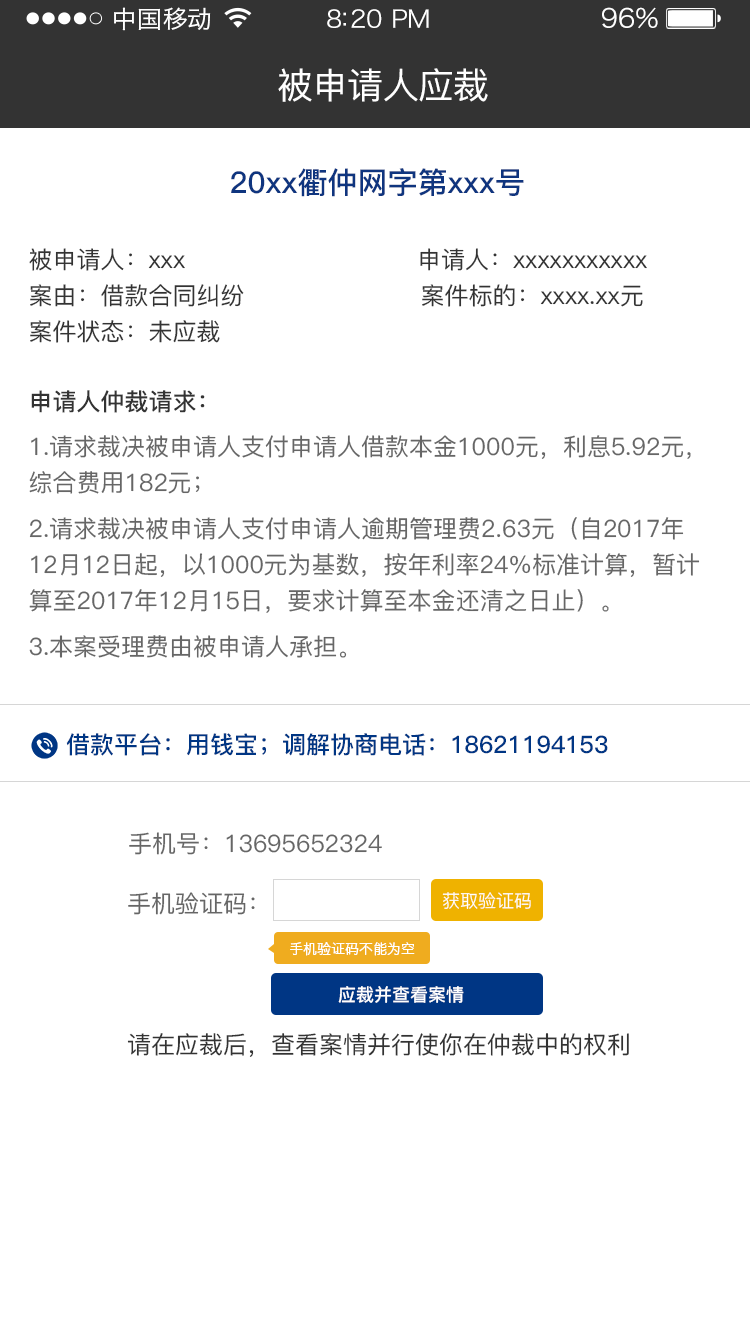
<style>
.page{position:relative;width:750px;height:1334px;background:#ffffff}
.page>*{position:absolute;margin:0}
.t1{font:24px "HiraginoSansGB-W3";letter-spacing:0.02em;color:#ffffff;scale:1.03 1}
.t2{font:24px "HiraginoSansGB-W3";letter-spacing:-0.02em;color:#ffffff;scale:1.03 1}
.t3{font:26.2px "HiraginoSansGB-W3";letter-spacing:-0.02em;color:#ffffff;scale:1.03 1}
.t4{font:36px "PingFang-SC-Medium";letter-spacing:-0.02em;color:#ffffff}
.t5{font:30px "PingFang-SC-Bold";color:#0f357f}
.t6{font:24px/36px "PingFang-SC-Medium";color:#333333}
.t7{font:24px "PingFang-SC-Bold";color:#333333}
.t8{font:24px/36px "PingFang-SC-Medium";color:#666666}
.t9{font:24px "PingFang-SC-Medium";color:#666666}
.t10{font:24px "PingFang-SC-Bold";color:#003684}
.t11{font:18px "PingFang-SC-Regular";color:#ffffff}
.t12{font:14px "HiraginoSansGB-W3";color:#ffffff}
.t13{font:18px "PingFang-SC-Bold";color:#ffffff}
.t14{font:24px "PingFang-SC-Medium";color:#333333}
</style>
<div class="page">
<p class="t1" style="left:114px;top:7px;width:97px;height:24px">中国移动</p>
<p class="t2" style="left:327px;top:9px;width:102px;height:19px">8:20 PM</p>
<p class="t3" style="left:602px;top:7px;width:56px;height:22px">96%</p>
<p class="t4" style="left:278px;top:68px;width:210px;height:34px">被申请人应裁</p>
<p class="t5" style="left:231px;top:168px;width:293px;height:29px">20xx衢仲网字第xxx号</p>
<p class="t6" style="left:29px;top:248px;width:618px;height:95px">被申请人：xxx                             申请人：xxxxxxxxxxx<br>案由：借款合同纠纷                      案件标的：xxxx.xx元<br>案件状态：未应裁</p>
<p class="t7" style="left:31px;top:390px;width:174px;height:23px">申请人仲裁请求：</p>
<p class="t8" style="left:29px;top:435px;width:662px;height:59px">1.请求裁决被申请人支付申请人借款本金1000元，利息5.92元，<br>综合费用182元；</p>
<p class="t8" style="left:29px;top:517px;width:671px;height:96px">2.请求裁决被申请人支付申请人逾期管理费2.63元（自2017年<br>12月12日起，以1000元为基数，按年利率24%标准计算，暂计<br>算至2017年12月15日，要求计算至本金还清之日止）。</p>
<p class="t9" style="left:29px;top:635px;width:318px;height:23px">3.本案受理费由被申请人承担。</p>
<p class="t10" style="left:66px;top:733px;width:542px;height:23px">借款平台：用钱宝；调解协商电话：18621194153</p>
<p class="t9" style="left:129px;top:832px;width:253px;height:23px">手机号：13695652324</p>
<p class="t9" style="left:128px;top:892px;width:127px;height:23px">手机验证码：</p>
<p class="t11" style="left:442px;top:892px;width:89px;height:17px">获取验证码</p>
<p class="t12" style="left:290px;top:942px;width:125px;height:14px">手机验证码不能为空</p>
<p class="t13" style="left:338px;top:986px;width:126px;height:17px">应裁并查看案情</p>
<p class="t14" style="left:127px;top:1033px;width:502px;height:24px">请在应裁后，查看案情并行使你在仲裁中的权利</p>
</div>
